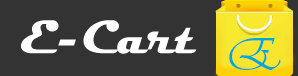
<style>
.page{position:relative;width:298px;height:76px;background:#333333}
.page>*{position:absolute;margin:0}
.t1{font:48px "Magneto-Bold";color:#ffffff}
.t2{font:48px "Vivaldii";color:#00a7d7}
</style>
<div class="page">
<p class="t1" style="left:21px;top:20px;width:176px;height:34px">E-Cart</p>
<p class="t2" style="left:229px;top:38px;width:52px;height:32px">E</p>
</div>
